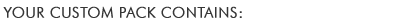
<style>
.page{position:relative;width:400px;height:24px;background:#ffffff}
.page>*{position:absolute;margin:0}
.t1{font:14.7px "FuturaBT-Light";letter-spacing:0.025em;color:#363636;text-transform:uppercase;font-weight:bold}
</style>
<div class="page">
<p class="t1" style="left:3px;top:6px;width:239px;height:12px">YOUR CUSTOM PACK CONTAINS:</p>
</div>
